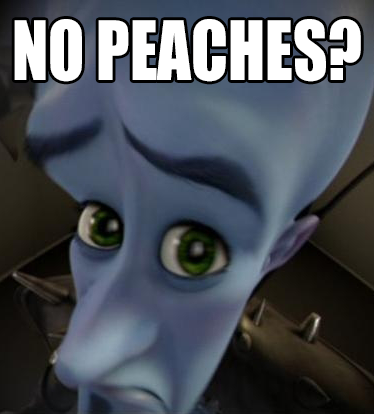
<style>
.page{position:relative;width:374px;height:414px}
.page>*{position:absolute;margin:0}
.t1{font:75.6px "Impact";color:#ffffff;scale:0.88 1}
</style>
<div class="page">
<p class="t1" style="left:14px;top:19px;width:347px;height:63px">NO PEACHES?</p>
</div>
